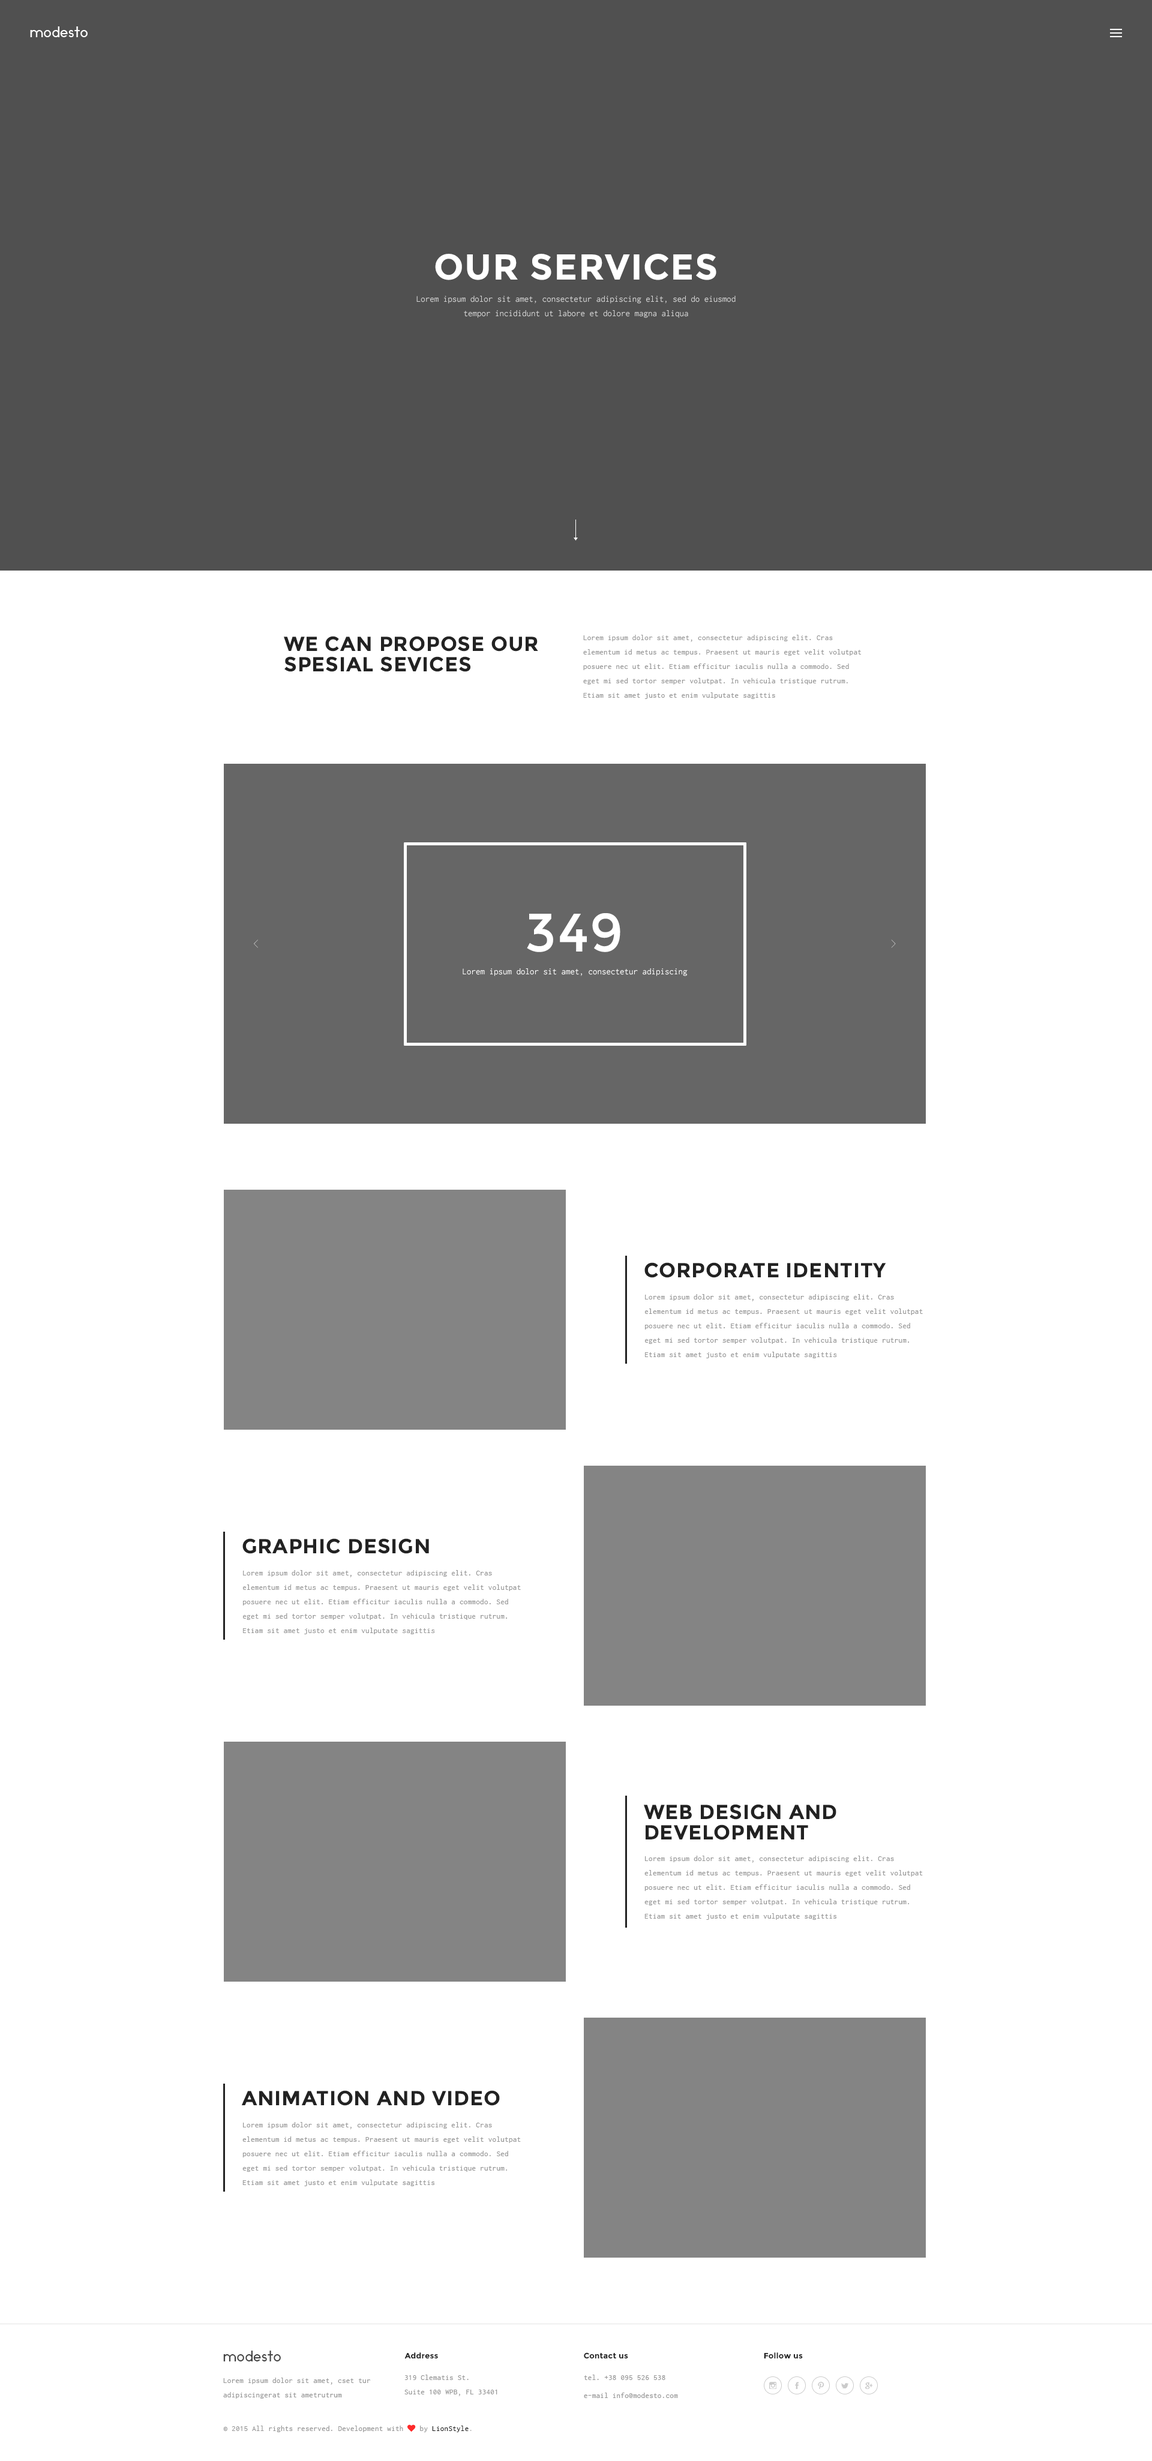
<style>
.page{position:relative;width:1152px;height:2461px;background:#ffffff}
.page>*{position:absolute;margin:0}
.t1{font:14.4px "Ikaros";letter-spacing:0.025em;color:#ffffff}
.t2{font:36px "Montserrat-Bold";letter-spacing:0.025em;color:#ffffff;text-transform:uppercase}
.t3{font:9px/14.4px "Inconsolata";color:#d5d5d5}
.t4{font:20.4px/20.4px "Montserrat-Bold";letter-spacing:0.025em;color:#222222;text-transform:uppercase}
.t5{font:7.8px/14.4px "Inconsolata";letter-spacing:0.025em;color:#989898}
.t6{font:54px "Montserrat-Regular";letter-spacing:0.025em;color:#ffffff;text-transform:uppercase}
.t7{font:26.4px "DecorCyrillic";scale:0.6 1}
.t8{font:26.4px "DecorCyrillic";letter-spacing:-0.05em;scale:0.59 1}
.t9{font:9px "Inconsolata";color:#ffffff}
.t10{font:20.4px "Montserrat-Bold";letter-spacing:0.025em;color:#222222}
.t11{font:20.4px/20.4px "Montserrat-Bold";letter-spacing:0.025em;color:#222222}
.t12{font:14.4px "Ikaros";letter-spacing:0.025em;color:#444444}
.t13{font:7.8px "Montserrat-Bold";letter-spacing:0.025em;color:#222222}
.t14{font:7.8px/18px "Inconsolata";letter-spacing:0.025em;color:#989898}
.t15{font:7.8px "Inconsolata";letter-spacing:0.025em;color:#989898}
.t16{font:7.8px "FontAwesome";letter-spacing:0.025em;color:#fe2b2b}
.t17{font:7.8px "Inconsolata";letter-spacing:0.025em;color:#222222}
.t18{font:7.8px "Inconsolata";letter-spacing:0.025em;color:#b5b5b5}
</style>
<div class="page">
<p class="t1" style="left:30px;top:26px;width:58px;height:11px">modesto</p>
<p class="t2" style="left:435px;top:254px;width:281px;height:26px">our services</p>
<p class="t3" style="left:416px;top:296px;width:320px;height:22px;text-align:center">Lorem ipsum dolor sit amet, consectetur adipiscing elit, sed do eiusmod tempor incididunt ut labore et dolore magna aliqua</p>
<p class="t4" style="left:284px;top:636px;width:254px;height:36px">we can propose our <br>SPESIAL sevices</p>
<p class="t5" style="left:583px;top:635px;width:279px;height:64px">Lorem ipsum dolor sit amet, consectetur adipiscing elit. Cras elementum id metus ac tempus. Praesent ut mauris eget velit volutpat posuere nec ut elit. Etiam efficitur iaculis nulla a commodo. Sed eget mi sed tortor semper volutpat. In vehicula tristique rutrum. Etiam sit amet justo et enim vulputate sagittis</p>
<p class="t6" style="left:527px;top:913px;width:93px;height:39px">349</p>
<p class="t7" style="left:254px;top:940px;width:4px;height:8px">&lt;</p>
<p class="t8" style="left:891px;top:940px;width:5px;height:8px">&gt;</p>
<p class="t9" style="left:463px;top:968px;width:225px;height:8px">Lorem ipsum dolor sit amet, consectetur adipiscing</p>
<p class="t10" style="left:644px;top:1262px;width:242px;height:16px">CORPORATE IDENTITY</p>
<p class="t5" style="left:645px;top:1294px;width:278px;height:64px">Lorem ipsum dolor sit amet, consectetur adipiscing elit. Cras elementum id metus ac tempus. Praesent ut mauris eget velit volutpat posuere nec ut elit. Etiam efficitur iaculis nulla a commodo. Sed eget mi sed tortor semper volutpat. In vehicula tristique rutrum. Etiam sit amet justo et enim vulputate sagittis</p>
<p class="t10" style="left:242px;top:1538px;width:187px;height:16px">GRAPHIC DESIGN</p>
<p class="t5" style="left:243px;top:1570px;width:278px;height:64px">Lorem ipsum dolor sit amet, consectetur adipiscing elit. Cras elementum id metus ac tempus. Praesent ut mauris eget velit volutpat posuere nec ut elit. Etiam efficitur iaculis nulla a commodo. Sed eget mi sed tortor semper volutpat. In vehicula tristique rutrum. Etiam sit amet justo et enim vulputate sagittis</p>
<p class="t11" style="left:644px;top:1804px;width:192px;height:36px">WEB DESIGN AND <br>DEVELOPMENT</p>
<p class="t5" style="left:644px;top:1856px;width:279px;height:64px">Lorem ipsum dolor sit amet, consectetur adipiscing elit. Cras elementum id metus ac tempus. Praesent ut mauris eget velit volutpat posuere nec ut elit. Etiam efficitur iaculis nulla a commodo. Sed eget mi sed tortor semper volutpat. In vehicula tristique rutrum. Etiam sit amet justo et enim vulputate sagittis</p>
<p class="t10" style="left:241px;top:2090px;width:259px;height:16px">ANIMATION AND VIDEO</p>
<p class="t5" style="left:242px;top:2122px;width:279px;height:64px">Lorem ipsum dolor sit amet, consectetur adipiscing elit. Cras elementum id metus ac tempus. Praesent ut mauris eget velit volutpat posuere nec ut elit. Etiam efficitur iaculis nulla a commodo. Sed eget mi sed tortor semper volutpat. In vehicula tristique rutrum. Etiam sit amet justo et enim vulputate sagittis</p>
<p class="t12" style="left:223px;top:2351px;width:58px;height:11px">modesto</p>
<p class="t13" style="left:404px;top:2353px;width:34px;height:6px">Address</p>
<p class="t13" style="left:584px;top:2353px;width:44px;height:6px">Contact us</p>
<p class="t13" style="left:764px;top:2353px;width:39px;height:6px">Follow us</p>
<p class="t5" style="left:223px;top:2378px;width:148px;height:21px">Lorem ipsum dolor sit amet, cset tur adipiscingerat sit ametrutrum</p>
<p class="t5" style="left:404px;top:2375px;width:93px;height:21px">319 Clematis St.<br>Suite 100 WPB, FL 33401</p>
<p class="t14" style="left:584px;top:2375px;width:94px;height:23px">tel. +38 095 526 538<br>e-mail info@modesto.com</p>
<p class="t15" style="left:223px;top:2425px;width:249px;height:7px">© 2015 All rights reserved. Development with <span class="t16">♥ </span>by<span class="t17"> LionStyle</span><span class="t18">.</span></p>
</div>
